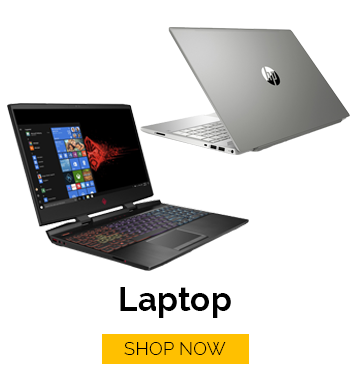
<style>
.page{position:relative;width:350px;height:373px;background:#ffffff}
.page>*{position:absolute;margin:0}
.t1{font:33.3px "Raleway-Bold";color:#000000}
.t2{font:18.5px "Raleway-Light";color:#000000}
</style>
<div class="page">
<p class="t1" style="left:120px;top:287px;width:111px;height:31px">Laptop</p>
<p class="t2" style="left:124px;top:342px;width:102px;height:13px">SHOP NOW</p>
</div>
